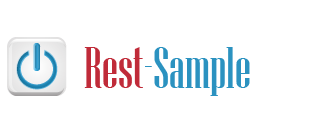
<style>
.page{position:relative;width:329px;height:140px;background:#ffffff}
.page>*{position:absolute;margin:0}
.t1{font:58.3px "NiagaraSolid-Reg";color:#2b92c0}
.t2{font:58.3px "NiagaraSolid-Reg";color:#c02b39}
</style>
<div class="page">
<p class="t1" style="left:84px;top:47px;width:166px;height:49px"><span class="t2">Rest</span>-Sample</p>
</div>
